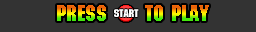
<style>
.page{position:relative;width:256px;height:32px;background:#333333}
.page>*{position:absolute;margin:0}
.t1{font:21.6px "MachineStd";scale:1.08 1}
.t2{font:10.8px "MachineStd";color:#fefefe;scale:1.1 1}
</style>
<div class="page">
<p class="t1" style="left:57px;top:5px;width:152px;height:16px">Press      to play</p>
<p class="t2" style="left:114px;top:9px;width:25px;height:8px">START</p>
</div>
